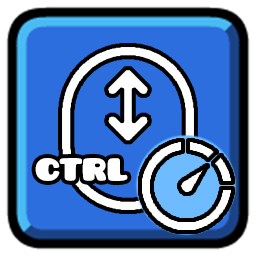
<style>
.page{position:relative;width:256px;height:256px;background:#2d6ede}
.page>*{position:absolute;margin:0}
.t1{font:35px "Pusab";color:#ffffff}
</style>
<div class="page">
<p class="t1" style="left:35px;top:158px;width:93px;height:23px">CTRL</p>
</div>
